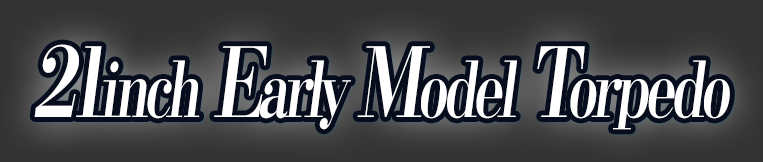
<style>
.page{position:relative;width:763px;height:162px}
.page>*{position:absolute;margin:0}
.t1{font:76.8px "KochoStd-Heavy";letter-spacing:-0.08em;color:#ffffff;font-style:italic;scale:0.72 1}
.t2{font:96px "KochoStd-Heavy";letter-spacing:-0.08em;color:#ffffff;font-style:italic;scale:0.72 1}
</style>
<div class="page">
<p class="t1" style="left:34px;top:44px;width:696px;height:86px"><span class="t2">21</span>inch<span class="t2"> E</span>arly <span class="t2">M</span>odel<span class="t2"> T</span>orpedo</p>
</div>
